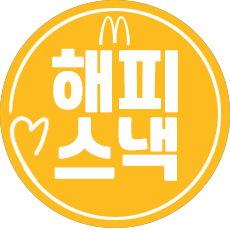
<style>
.page{position:relative;width:230px;height:230px;background:#fcbb1f}
.page>*{position:absolute;margin:0}
.t1{font:66.7px/66.7px "RecipekoreaM";color:#ffffff}
</style>
<div class="page">
<p class="t1" style="left:52px;top:48px;width:126px;height:133px;text-align:center">해피<br>스낵</p>
</div>
